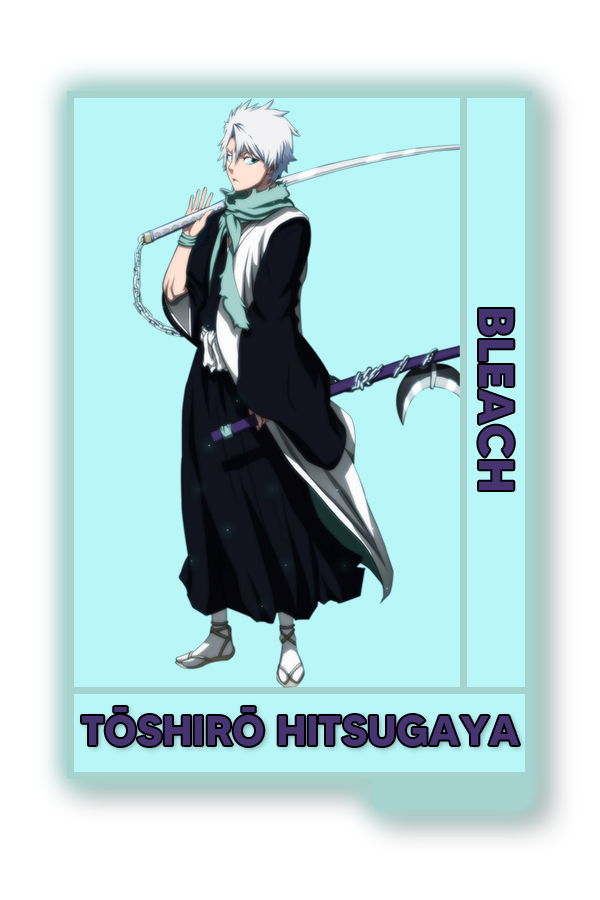
<style>
.page{position:relative;width:600px;height:900px;background:#b8f6f7}
.page>*{position:absolute;margin:0}
.t1{font:48.8px "MADETOMMY-Bold";color:#463470}
.t2{font:42.1px "MADETOMMY-Bold";color:#463470}
</style>
<div class="page">
<p class="t1" style="left:478px;top:309px;width:36px;height:181px;rotate:90deg">BLEACH</p>
<p class="t2" style="left:82px;top:707px;width:437px;height:39px">TŌSHIRŌ HITSUGAYA</p>
</div>
